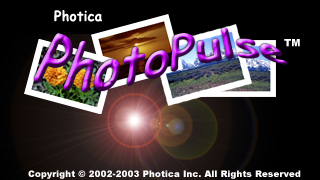
<style>
.page{position:relative;width:320px;height:180px;background:#000000}
.page>*{position:absolute;margin:0}
.t1{font:14px "ComicSansMS-Bold";color:#ffffff}
.t2{font:9px "Arial-Black";color:#ffffff}
</style>
<div class="page">
<p class="t1" style="left:54px;top:10px;width:48px;height:12px">Photica</p>
<p class="t2" style="left:28px;top:170px;width:273px;height:9px">Copyright © 2002-2003 Photica Inc. All Rights Reserved</p>
</div>
